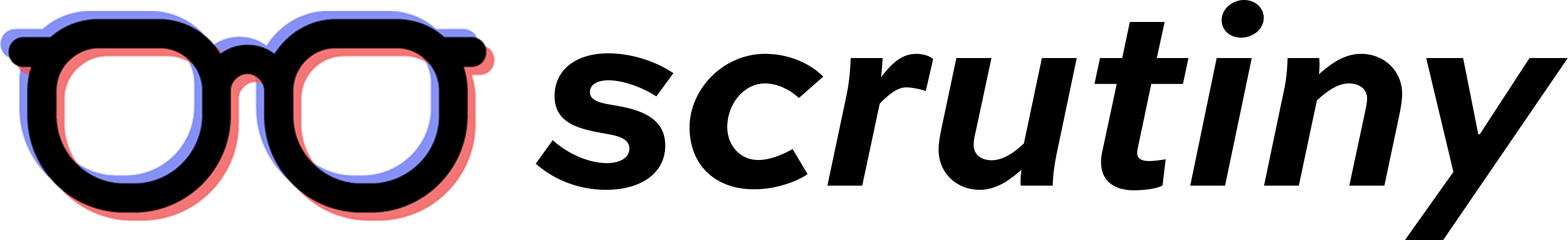
<style>
.page{position:relative;width:1568px;height:240px;background:#ffffff}
.page>*{position:absolute;margin:0}
.t1{font:261.6px "SweetSansPro-BoldItalic";letter-spacing:-0.01em;color:#000000}
.t2{font:261.6px "SweetSansPro-BoldItalic";letter-spacing:-0.01em;color:#3f414b}
</style>
<div class="page">
<p class="t1" style="left:536px;top:0px;width:1032px;height:240px"><span class="t2"> </span>scrutiny</p>
</div>
